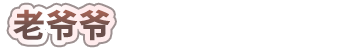
<style>
.page{position:relative;width:360px;height:50px;background:#ffffff}
.page>*{position:absolute;margin:0}
.t1{font:32px "SourceHanSansSC-Bold";color:#77544d;font-weight:bold}
</style>
<div class="page">
<p class="t1" style="left:13px;top:9px;width:97px;height:32px">老爷爷</p>
</div>
